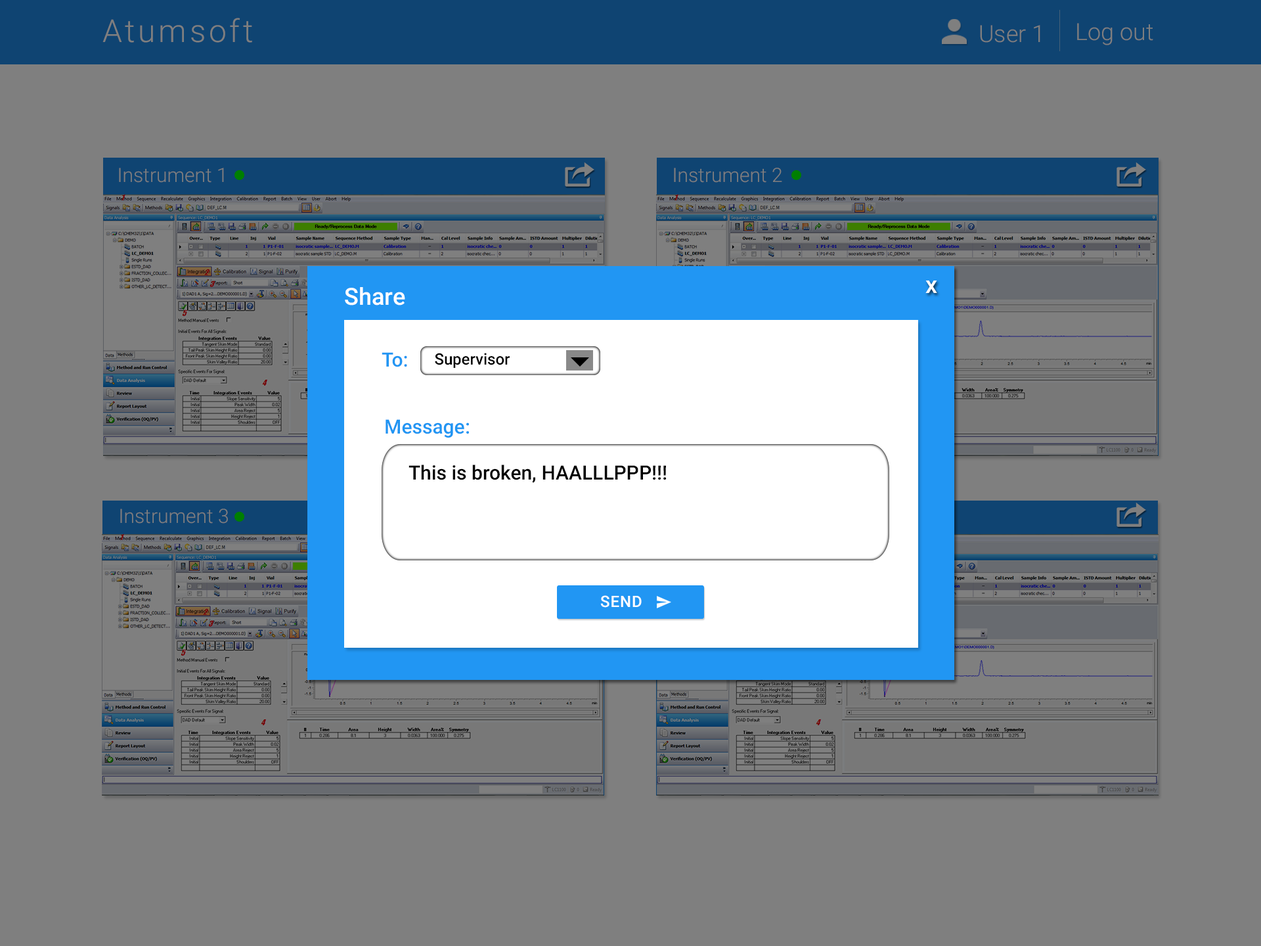
<style>
.page{position:relative;width:1261px;height:946px;background:#7f7f7f}
.page>*{position:absolute;margin:0}
.t1{font:31.5px "Roboto-Light";letter-spacing:0.1em;color:#7f7f7f}
.t2{font:23.6px "Roboto-Light";color:#7f7f7f}
.t3{font:19.7px "Roboto-Light";color:#7f7f7f}
.t4{font:23.6px "Roboto-Medium";color:#ffffff}
.t5{font:19.7px "Roboto-Medium";color:#2196f3}
.t6{font:15.8px "Roboto-Medium";color:#000000}
.t7{font:19.7px "Roboto-Medium";color:#000000}
.t8{font:15.8px "Roboto-Medium";letter-spacing:0.041em;color:#ffffff}
</style>
<div class="page">
<p class="t1" style="left:102px;top:18px;width:150px;height:25px">Atumsoft</p>
<p class="t2" style="left:980px;top:25px;width:60px;height:18px">User 1</p>
<p class="t2" style="left:1077px;top:23px;width:76px;height:22px">Log out</p>
<p class="t3" style="left:119px;top:167px;width:105px;height:16px">Instrument 1</p>
<p class="t3" style="left:674px;top:167px;width:108px;height:16px">Instrument 2</p>
<p class="t4" style="left:925px;top:280px;width:12px;height:13px">x</p>
<p class="t4" style="left:345px;top:287px;width:60px;height:18px">Share</p>
<p class="t5" style="left:382px;top:352px;width:25px;height:15px">To:</p>
<p class="t6" style="left:435px;top:353px;width:75px;height:15px">Supervisor</p>
<p class="t5" style="left:385px;top:419px;width:84px;height:19px">Message:</p>
<p class="t7" style="left:408px;top:464px;width:259px;height:19px">This is broken, HAALLLPPP!!!</p>
<p class="t3" style="left:120px;top:508px;width:108px;height:15px">Instrument 3</p>
<p class="t8" style="left:600px;top:595px;width:42px;height:12px">SEND</p>
</div>
